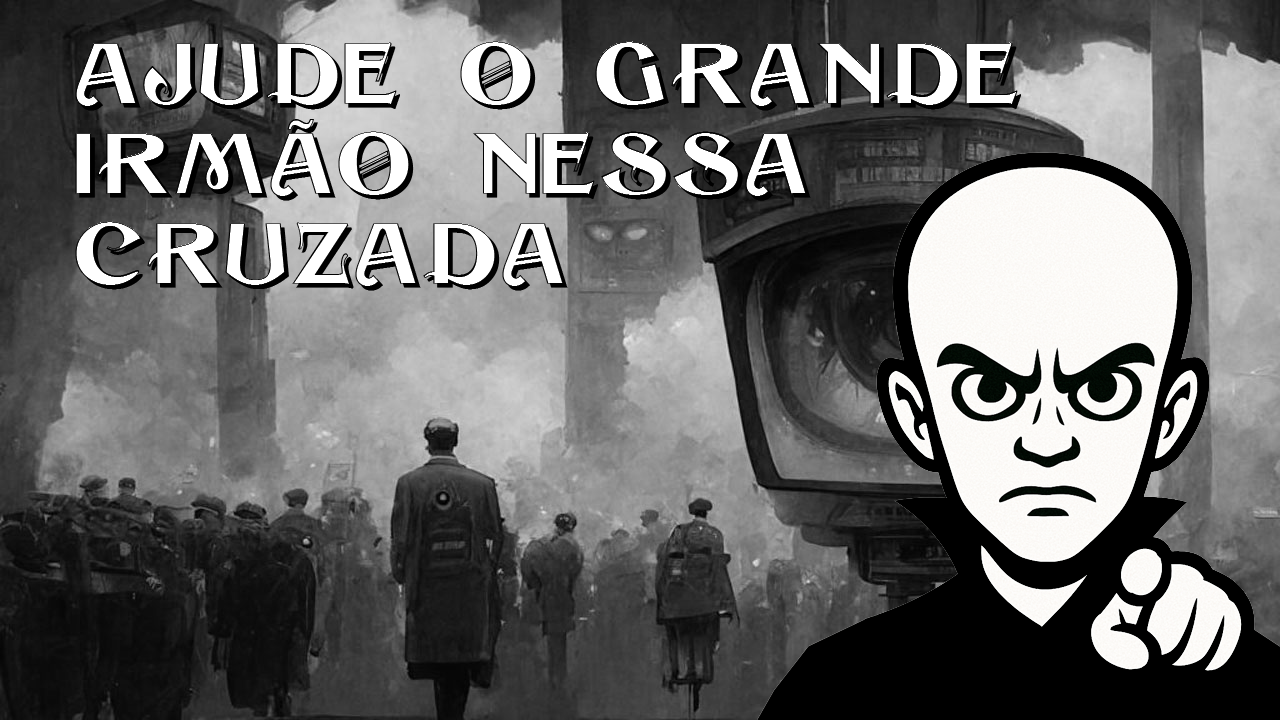
<style>
.page{position:relative;width:1280px;height:720px}
.page>*{position:absolute;margin:0}
.t1{font:75px "Sesame-Shadow";color:#000000}
</style>
<div class="page">
<p class="t1" style="left:75px;top:41px;width:946px;height:250px">AJUDE O GRANDE<br>IRMÃO NESSA<br>CRUZADA</p>
</div>
